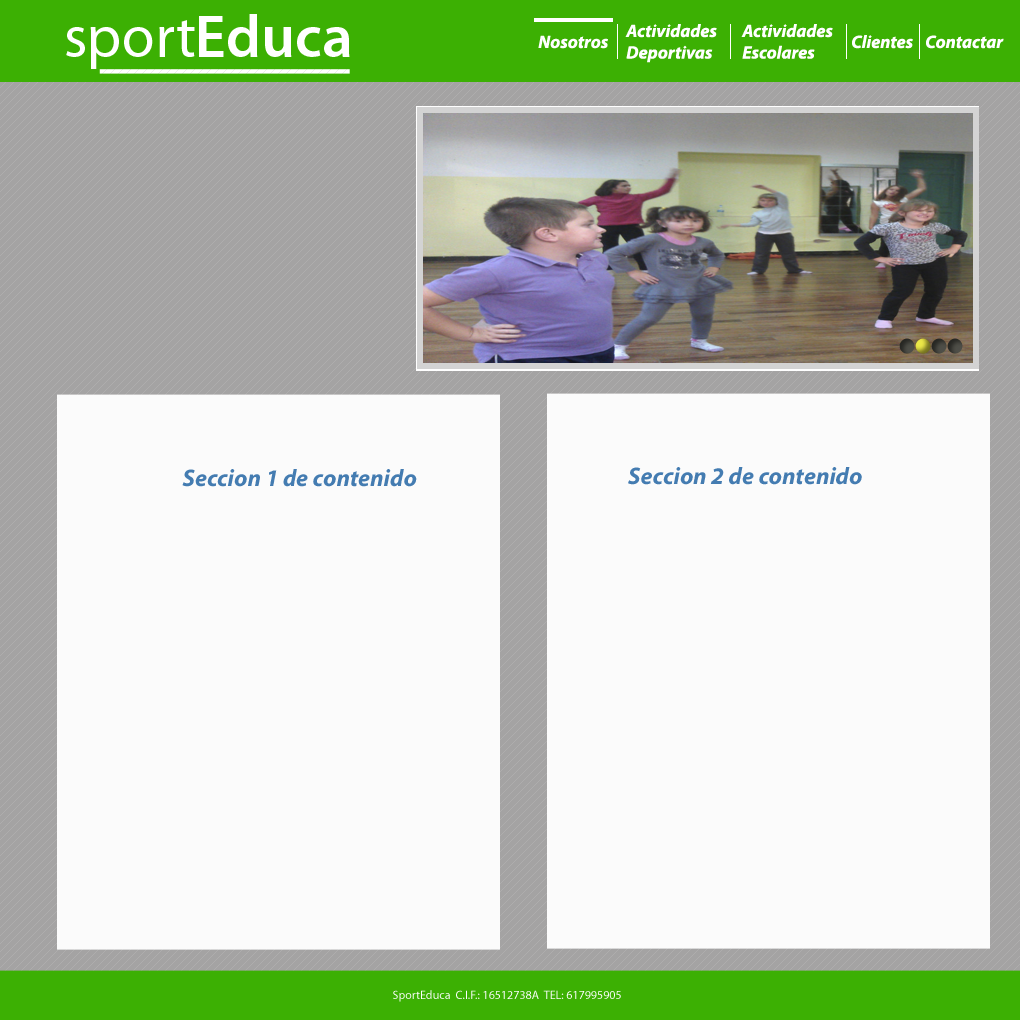
<style>
.page{position:relative;width:1020px;height:1020px;background:#fbfbfb}
.page>*{position:absolute;margin:0}
.t1{font:60px "MyriadPro-Regular";color:#ffffff}
.t2{font:60px "MyriadPro-Semibold";color:#ffffff}
.t3{font:18px "MyriadPro-BoldIt";color:#ffffff}
.t4{font:24px "MyriadPro-BoldIt";color:#447cb1}
.t5{font:12px "MyriadPro-Regular";color:#fdfeff}
</style>
<div class="page">
<p class="t1" style="left:66px;top:14px;width:284px;height:55px">sport<span class="t2">Educa</span></p>
<p class="t3" style="left:625px;top:24px;width:92px;height:39px">Actividades<br>Deportivas</p>
<p class="t3" style="left:741px;top:24px;width:92px;height:35px">Actividades<br>Escolares</p>
<p class="t3" style="left:538px;top:35px;width:70px;height:14px">Nosotros</p>
<p class="t3" style="left:852px;top:35px;width:61px;height:14px">Clientes</p>
<p class="t3" style="left:926px;top:35px;width:78px;height:14px">Contactar</p>
<p class="t4" style="left:182px;top:469px;width:235px;height:18px">Seccion 1 de contenido</p>
<p class="t4" style="left:628px;top:467px;width:234px;height:18px">Seccion 2 de contenido</p>
<p class="t5" style="left:393px;top:990px;width:228px;height:12px">SportEduca  C.I.F.: 16512738A  TEL: 617995905</p>
</div>
